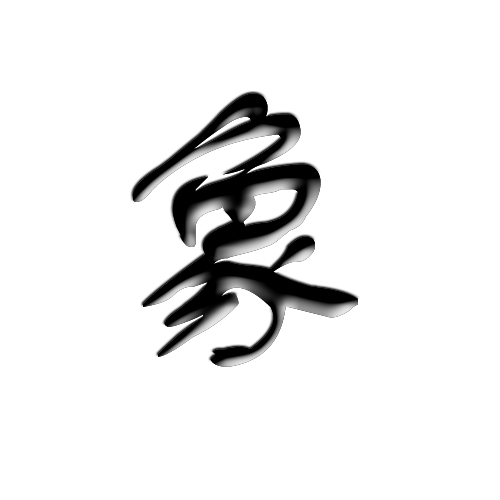
<style>
.page{position:relative;width:500px;height:500px;background:#ffffff}
.page>*{position:absolute;margin:0}
.t1{font:320px "FZSTK--GBK1-0"}
</style>
<div class="page">
<p class="t1" style="left:132px;top:93px;width:226px;height:274px">象</p>
</div>
